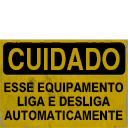
<style>
.page{position:relative;width:128px;height:128px;background:#ffffff}
.page>*{position:absolute;margin:0}
.t1{font:29.4px "Helvetica-Narrow-Bold";color:#bd9a00}
.t2{font:13.4px "MHeiPRC-Xbold";letter-spacing:-0.005em;color:#000000;scale:0.82 1}
</style>
<div class="page">
<p class="t1" style="left:8px;top:48px;width:112px;height:22px">CUIDADO</p>
<p class="t2" style="left:4px;top:82px;width:120px;height:11px">ESSE EQUIPAMENTO</p>
<p class="t2" style="left:17px;top:96px;width:93px;height:11px">LIGA E DESLIGA</p>
<p class="t2" style="left:4px;top:110px;width:119px;height:11px">AUTOMATICAMENTE</p>
</div>
